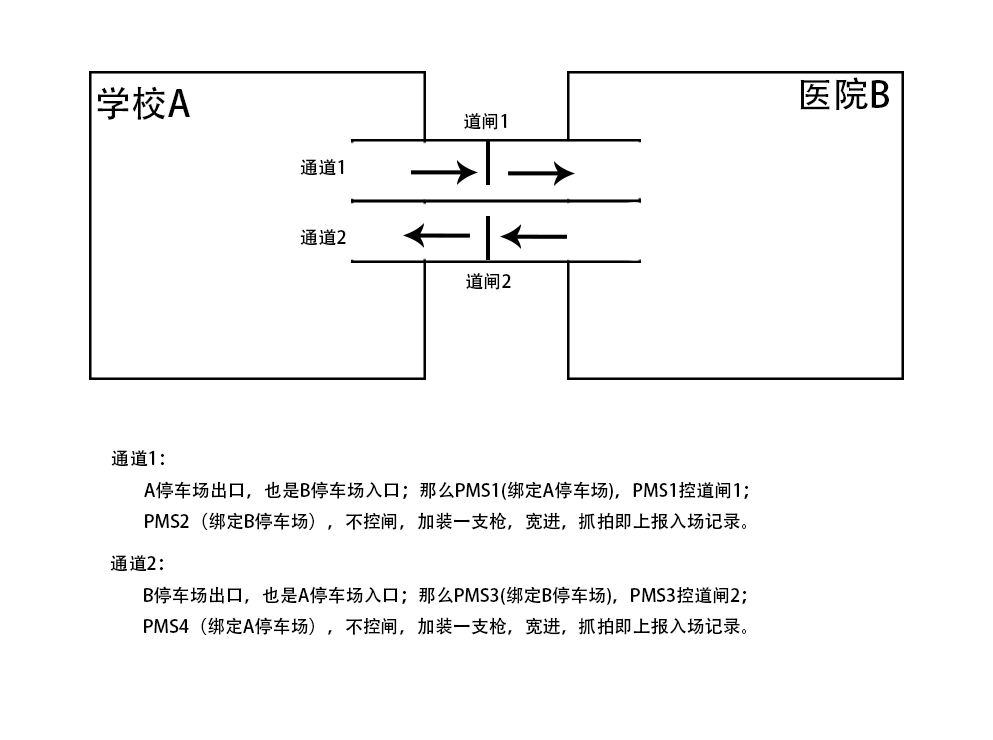
<style>
.page{position:relative;width:993px;height:740px;background:#ffffff}
.page>*{position:absolute;margin:0}
.t1{font:36px "AdobeHeitiStd-Regular";color:#010101}
.t2{font:18px "AdobeHeitiStd-Regular";color:#000000}
</style>
<div class="page">
<p class="t1" style="left:800px;top:77px;width:89px;height:33px">医院B</p>
<p class="t1" style="left:97px;top:86px;width:93px;height:34px">学校A</p>
<p class="t2" style="left:464px;top:113px;width:43px;height:17px">道闸1</p>
<p class="t2" style="left:300px;top:159px;width:44px;height:16px">通道1</p>
<p class="t2" style="left:300px;top:229px;width:46px;height:16px">通道2</p>
<p class="t2" style="left:466px;top:273px;width:45px;height:17px">道闸2</p>
<p class="t2" style="left:111px;top:450px;width:638px;height:80px;text-align:center">通道1：<br>A停车场出口，也是B停车场入口；那么PMS1(绑定A停车场)，PMS1控道闸1；<br>PMS2（绑定B停车场），不控闸，加装一支枪，宽进，抓拍即上报入场记录。</p>
<p class="t2" style="left:110px;top:555px;width:637px;height:80px;text-align:center">通道2：<br>B停车场出口，也是A停车场入口；那么PMS3(绑定B停车场)，PMS3控道闸2；<br>PMS4（绑定A停车场），不控闸，加装一支枪，宽进，抓拍即上报入场记录。</p>
</div>
